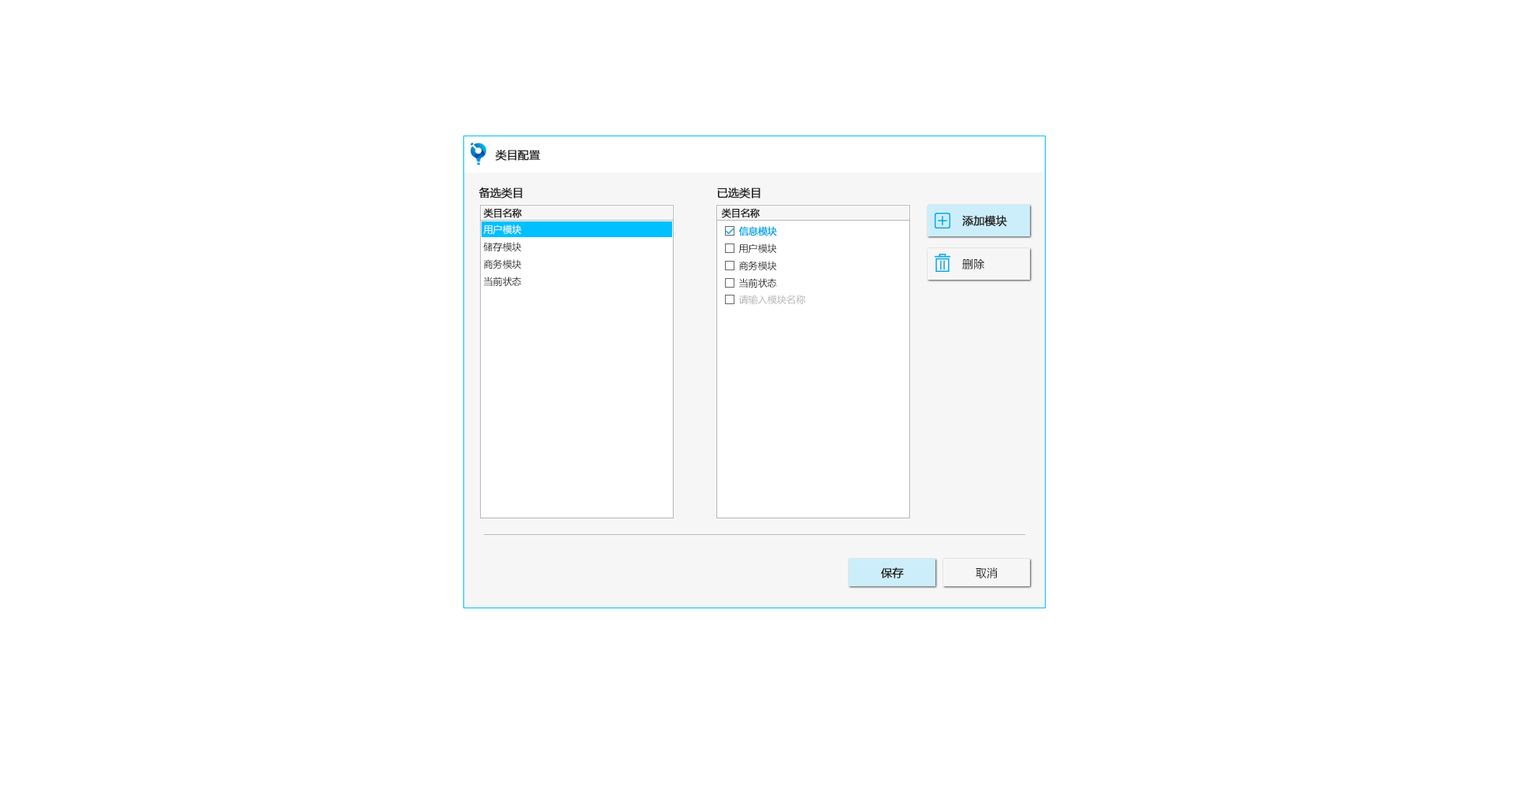
<style>
.page{position:relative;width:1513px;height:788px;background:#ffffff}
.page>*{position:absolute;margin:0}
.t1{font:11px "MicrosoftYaHei";letter-spacing:0.01em;color:#252525;font-weight:bold}
.t2{font:9.5px "MicrosoftYaHei";letter-spacing:0.01em;color:#252525;font-weight:bold}
.t3{font:9.5px "MicrosoftYaHei";letter-spacing:0.01em;color:#ffffff}
.t4{font:9.5px "MicrosoftYaHei";letter-spacing:0.01em;color:#05a8e9;font-weight:bold}
.t5{font:9.5px "MicrosoftYaHei";letter-spacing:0.01em;color:#252525}
.t6{font:11px "MicrosoftYaHei";letter-spacing:0.01em;color:#252525}
.t7{font:9.5px "MicrosoftYaHei";letter-spacing:0.01em;color:#b5b5b5}
</style>
<div class="page">
<p class="t1" style="left:495px;top:150px;width:46px;height:11px">类目配置</p>
<p class="t1" style="left:478px;top:187px;width:44px;height:12px">备选类目</p>
<p class="t1" style="left:717px;top:188px;width:43px;height:11px">已选类目</p>
<p class="t2" style="left:483px;top:208px;width:39px;height:10px">类目名称</p>
<p class="t2" style="left:721px;top:208px;width:39px;height:10px">类目名称</p>
<p class="t1" style="left:962px;top:215px;width:45px;height:12px">添加模块</p>
<p class="t3" style="left:483px;top:225px;width:39px;height:10px">用户模块</p>
<p class="t4" style="left:738px;top:226px;width:39px;height:10px">信息模块</p>
<p class="t5" style="left:483px;top:242px;width:39px;height:10px">储存模块</p>
<p class="t5" style="left:738px;top:244px;width:39px;height:10px">用户模块</p>
<p class="t5" style="left:484px;top:259px;width:38px;height:11px">商务模块</p>
<p class="t5" style="left:739px;top:261px;width:38px;height:10px">商务模块</p>
<p class="t6" style="left:962px;top:258px;width:23px;height:12px">删除</p>
<p class="t5" style="left:484px;top:277px;width:38px;height:10px">当前状态</p>
<p class="t5" style="left:739px;top:278px;width:38px;height:10px">当前状态</p>
<p class="t7" style="left:738px;top:295px;width:67px;height:10px">请输入模块名称</p>
<p class="t1" style="left:881px;top:567px;width:23px;height:11px">保存</p>
<p class="t6" style="left:976px;top:567px;width:22px;height:11px">取消</p>
</div>
